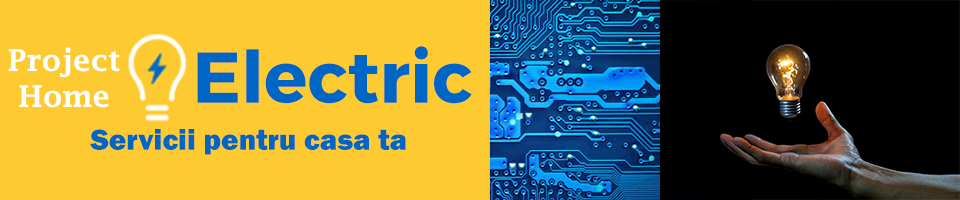
<style>
.page{position:relative;width:960px;height:200px;background:#feca32}
.page>*{position:absolute;margin:0}
.t1{font:30px "LucidaFax-Demi";color:#feffff}
.t2{font:72px "TruenoBd";color:#0066c5}
.t3{font:30px "FranklinGothic-Heavy";color:#0066c5}
</style>
<div class="page">
<p class="t1" style="left:8px;top:47px;width:112px;height:61px;text-align:center">Project<br>Home</p>
<p class="t2" style="left:197px;top:46px;width:275px;height:58px">Electric</p>
<p class="t3" style="left:90px;top:129px;width:316px;height:26px">Servicii pentru casa ta</p>
</div>
